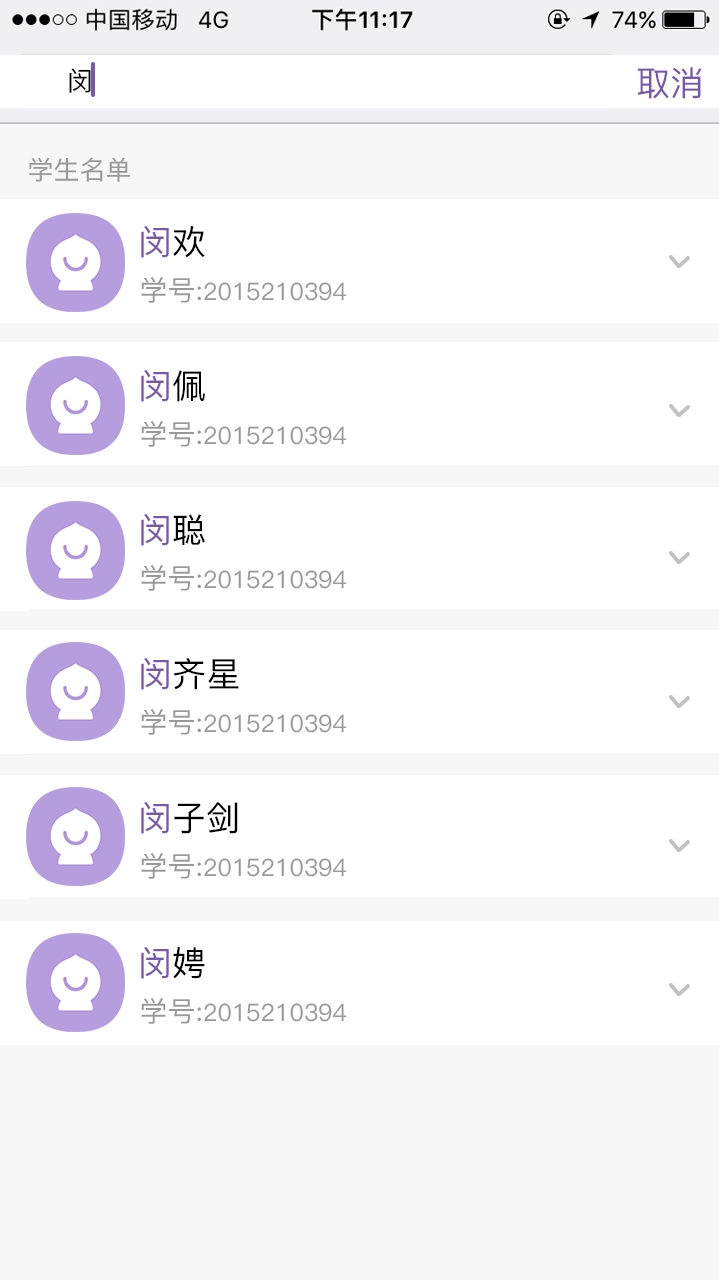
<style>
.page{position:relative;width:719px;height:1280px;background:#ffffff}
.page>*{position:absolute;margin:0}
.t1{font:26px "PingFangSC-Medium";color:#000000}
.t2{font:34px "PingFangSC-Medium";color:#7858ad}
.t3{font:26px "PingFangSC-Medium";color:#999999}
.t4{font:34px "PingFangSC-Medium";color:#000000}
.t5{font:24px "PingFangSC-Medium";color:#999999}
.t6{font:28px "PingFangSC-Medium";color:#999999}
</style>
<div class="page">
<p class="t1" style="left:69px;top:68px;width:22px;height:25px">闵</p>
<p class="t2" style="left:637px;top:67px;width:65px;height:32px">取消</p>
<p class="t3" style="left:29px;top:157px;width:102px;height:25px">学生名单</p>
<p class="t2" style="left:141px;top:226px;width:64px;height:32px">闵<span class="t4">欢</span></p>
<p class="t5" style="left:141px;top:276px;width:206px;height:27px"><span class="t6">学号:</span>2015210394</p>
<p class="t2" style="left:141px;top:370px;width:64px;height:32px">闵<span class="t4">佩</span></p>
<p class="t5" style="left:141px;top:420px;width:206px;height:27px"><span class="t6">学号:</span>2015210394</p>
<p class="t2" style="left:141px;top:514px;width:64px;height:32px">闵<span class="t4">聪</span></p>
<p class="t5" style="left:141px;top:564px;width:206px;height:27px"><span class="t6">学号:</span>2015210394</p>
<p class="t4" style="left:141px;top:658px;width:98px;height:32px"><span class="t2">闵</span>齐星</p>
<p class="t5" style="left:141px;top:708px;width:206px;height:27px"><span class="t6">学号:</span>2015210394</p>
<p class="t4" style="left:141px;top:802px;width:97px;height:32px"><span class="t2">闵</span>子剑</p>
<p class="t5" style="left:141px;top:852px;width:206px;height:27px"><span class="t6">学号:</span>2015210394</p>
<p class="t2" style="left:141px;top:947px;width:64px;height:32px">闵<span class="t4">娉</span></p>
<p class="t5" style="left:141px;top:997px;width:206px;height:27px"><span class="t6">学号:</span>2015210394</p>
</div>
